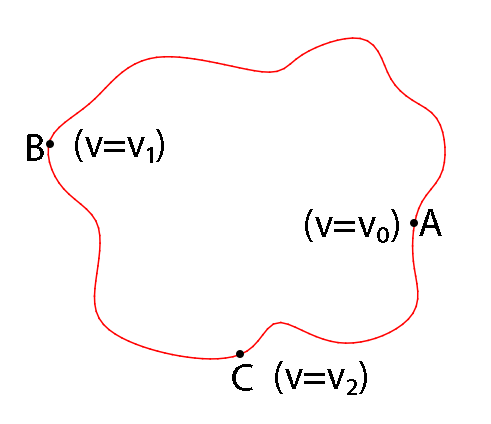
<style>
.page{position:relative;width:491px;height:424px;background:#ffffff}
.page>*{position:absolute;margin:0}
.t1{font:40px "MyriadPro-Regular";color:#000000}
</style>
<div class="page">
<p class="t1" style="left:27px;top:134px;width:17px;height:27px">B</p>
<p class="t1" style="left:75px;top:129px;width:89px;height:34px">(v=v1)</p>
<p class="t1" style="left:305px;top:209px;width:94px;height:34px">(v=v0)</p>
<p class="t1" style="left:419px;top:209px;width:23px;height:27px">A</p>
<p class="t1" style="left:232px;top:364px;width:21px;height:27px">C</p>
<p class="t1" style="left:275px;top:361px;width:92px;height:34px">(v=v2)</p>
</div>
